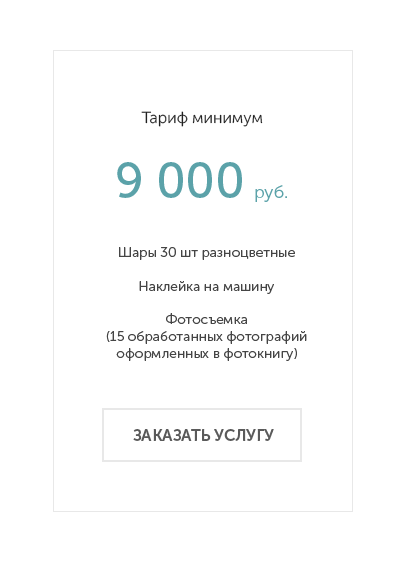
<style>
.page{position:relative;width:406px;height:561px;background:#ffffff}
.page>*{position:absolute;margin:0}
.t1{font:16px "MuseoSansCyrl-300";color:#212121}
.t2{font:48px "MuseoSansCyrl-500";color:#5ba2a9}
.t3{font:18px "MuseoSansCyrl-300";color:#5ba2a9}
.t4{font:14px "MuseoSansCyrl-300";color:#454545}
.t5{font:16px "MuseoSansCyrl-700";color:#5a5a5a;text-transform:uppercase}
</style>
<div class="page">
<p class="t1" style="left:141px;top:111px;width:122px;height:16px">Тариф минимум</p>
<p class="t2" style="left:117px;top:162px;width:125px;height:36px">9 000</p>
<p class="t3" style="left:255px;top:185px;width:32px;height:17px">руб.</p>
<p class="t4" style="left:106px;top:247px;width:201px;height:114px;text-align:center">Шары 30 шт разноцветные  <br> <br>Наклейка на машину  <br> <br>Фотосъемка <br>(15 обработанных фотографий оформленных в фотокнигу)</p>
<p class="t5" style="left:133px;top:429px;width:141px;height:12px">Заказать услугу</p>
</div>
